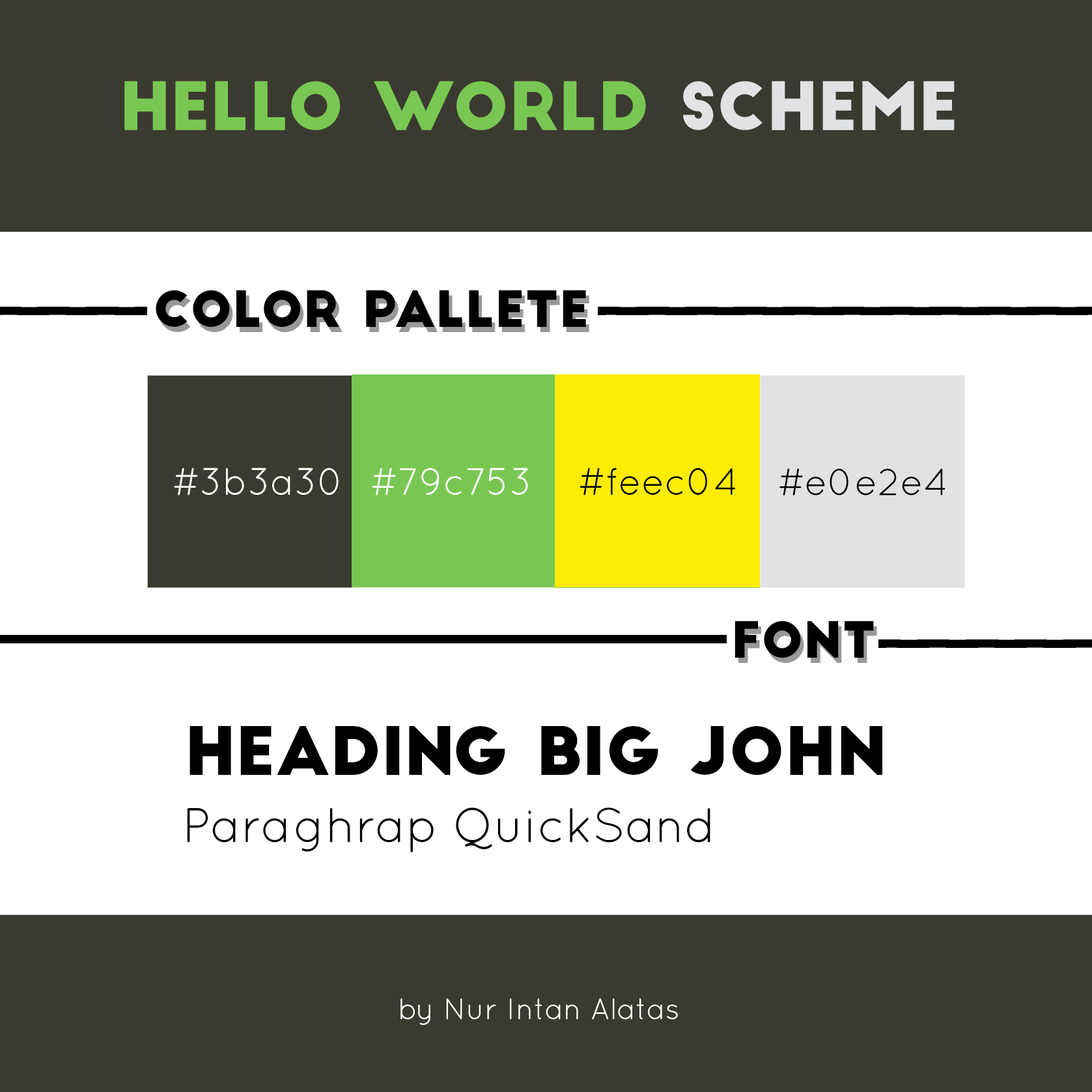
<style>
.page{position:relative;width:1092px;height:1092px;background:#ffffff}
.page>*{position:absolute;margin:0}
.t1{font:65.1px "BigJohn";color:#79c753}
.t2{font:65.1px "BigJohn";color:#e0e2e4}
.t3{font:48.8px "BigJohn";color:#000000}
.t4{font:38.3px "Quicksand-Regular";color:#ffffff}
.t5{font:38.3px "Quicksand-Regular";color:#000000}
.t6{font:38px "Quicksand-Regular";color:#000000}
.t7{font:65.1px "BigJohn";color:#000000}
.t8{font:48.8px "Quicksand-Regular";color:#000000}
.t9{font:29.8px "Quicksand-Regular";color:#ffffff}
</style>
<div class="page">
<p class="t1" style="left:124px;top:81px;width:831px;height:49px">HEllo World <span class="t2">Scheme</span></p>
<p class="t3" style="left:156px;top:290px;width:430px;height:37px">Color Pallete</p>
<p class="t4" style="left:174px;top:468px;width:165px;height:28px">#3b3a30</p>
<p class="t4" style="left:372px;top:468px;width:156px;height:28px">#79c753</p>
<p class="t5" style="left:580px;top:468px;width:155px;height:28px">#feec04</p>
<p class="t6" style="left:779px;top:468px;width:166px;height:28px">#e0e2e4</p>
<p class="t3" style="left:735px;top:621px;width:139px;height:37px">fONT</p>
<p class="t7" style="left:189px;top:726px;width:693px;height:50px">Heading Big John</p>
<p class="t8" style="left:187px;top:807px;width:523px;height:45px">Paraghrap QuickSand</p>
<p class="t9" style="left:400px;top:998px;width:278px;height:27px">by Nur Intan Alatas</p>
</div>
